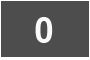
<style>
.page{position:relative;width:90px;height:60px;background:#4d4d4d}
.page>*{position:absolute;margin:0}
.t1{font:36px "Arial-BoldMT";color:#fafafa}
</style>
<div class="page">
<p class="t1" style="left:35px;top:17px;width:18px;height:26px">0</p>
</div>
